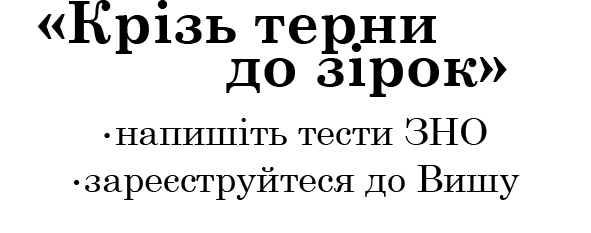
<style>
.page{position:relative;width:591px;height:233px;background:#ffffff}
.page>*{position:absolute;margin:0}
.t1{font:58.3px "CenturySchoolbook-Bold";color:#000000}
.t2{font:37.5px "CenturySchoolbook";color:#000000}
.t3{font:25px "CenturySchoolbook";color:#000000}
</style>
<div class="page">
<p class="t1" style="left:37px;top:0px;width:399px;height:54px">«Крізь терни</p>
<p class="t1" style="left:226px;top:43px;width:281px;height:54px">до зірок»</p>
<p class="t2" style="left:104px;top:118px;width:383px;height:27px"><span class="t3">•</span>напишіть тести ЗНО</p>
<p class="t2" style="left:73px;top:165px;width:447px;height:35px"><span class="t3">•</span>зареєструйтеся до Вишу</p>
</div>
